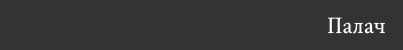
<style>
.page{position:relative;width:403px;height:50px;background:#333333}
.page>*{position:absolute;margin:0}
.t1{font:24px "CrimsonText-Regular";color:#ffffff}
</style>
<div class="page">
<p class="t1" style="left:328px;top:17px;width:57px;height:17px">Палач</p>
</div>
